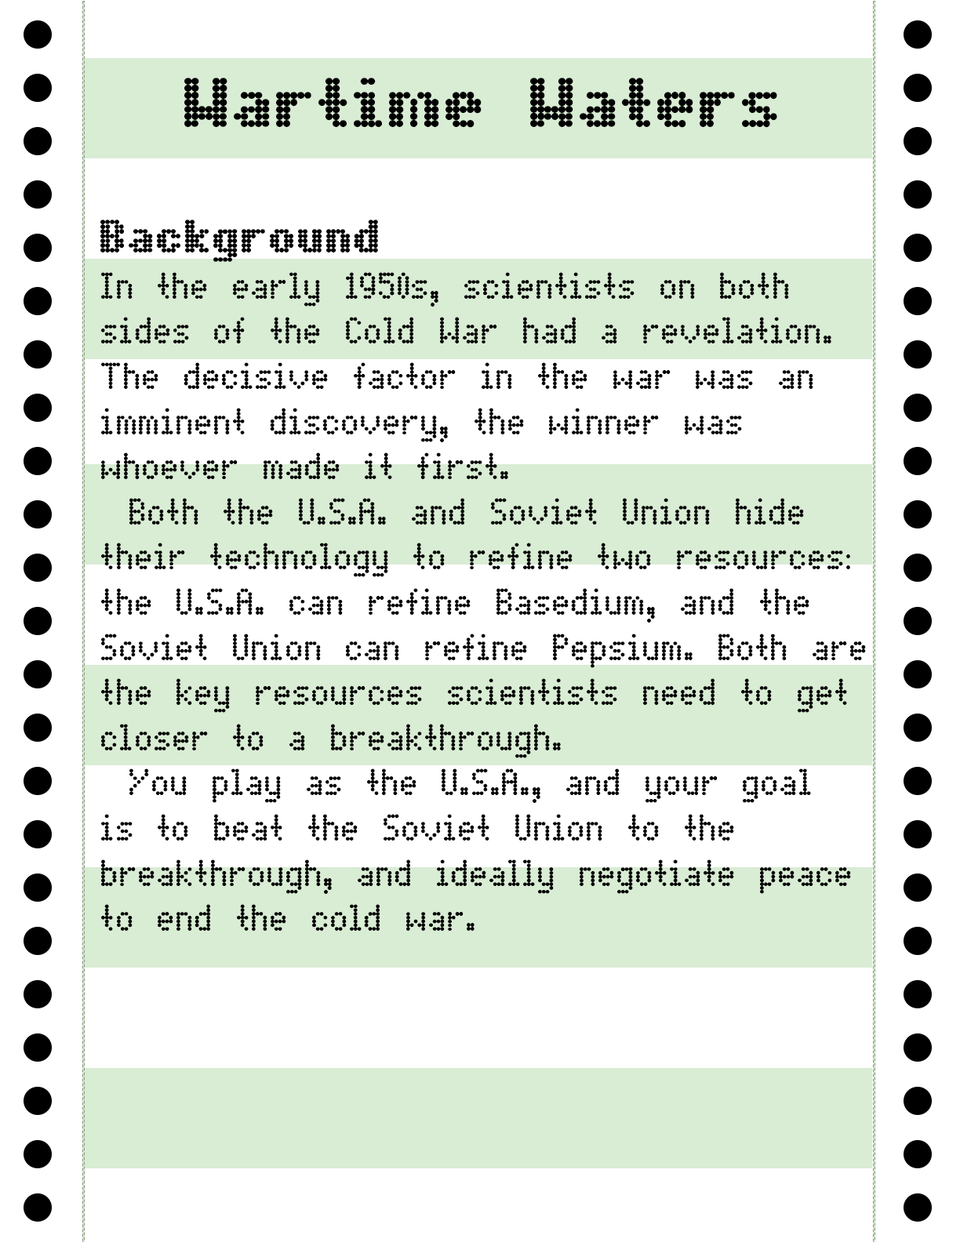
<style>
.page{position:relative;width:960px;height:1242px;background:#ffffff}
.page>*{position:absolute;margin:0}
.t1{font:70.6px "DotMatrixBold";color:#000000}
.t2{font:47.1px "DotMatrixBold";color:#000000}
.t3{font:37.6px "DotMatrix";color:#000000}
</style>
<div class="page">
<p class="t1" style="left:184px;top:78px;width:593px;height:50px">Wartime Waters</p>
<p class="t2" style="left:100px;top:220px;width:278px;height:42px">Background</p>
<p class="t3" style="left:101px;top:272px;width:765px;height:659px">In the early 1950s, scientists on both<br>sides of the Cold War had a revelation.<br>The decisive factor in the war was an<br>imminent discovery, the winner was<br>whoever made it first.<br> Both the U.S.A. and Soviet Union hide<br>their technology to refine two resources:<br>the U.S.A. can refine Basedium, and the<br>Soviet Union can refine Pepsium. Both are<br>the key resources scientists need to get<br>closer to a breakthrough.<br> You play as the U.S.A., and your goal<br>is to beat the Soviet Union to the<br>breakthrough, and ideally negotiate peace<br>to end the cold war.</p>
</div>
